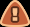
<style>
.page{position:relative;width:30px;height:27px;background:#000000}
.page>*{position:absolute;margin:0}
.t1{font:18px "Rockwell-ExtraBold";color:#fac18e}
</style>
<div class="page">
<p class="t1" style="left:12px;top:8px;width:6px;height:13px">!</p>
</div>
